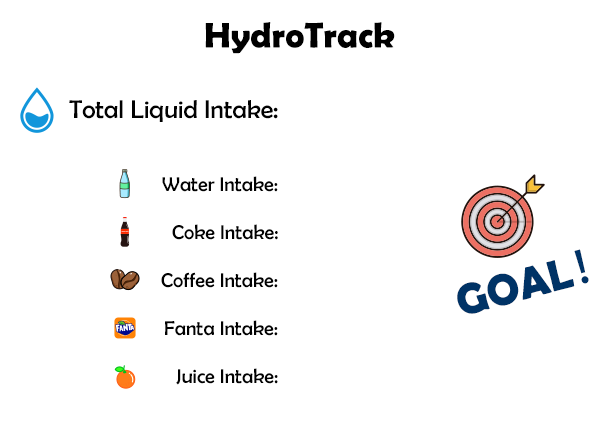
<style>
.page{position:relative;width:600px;height:448px;background:#ffffff}
.page>*{position:absolute;margin:0}
.t1{font:36px "BerlinSansFBDemi-Bold";color:#000000}
.t2{font:25.7px "BerlinSansFB-Reg";color:#010101}
.t3{font:20.2px "BerlinSansFB-Reg";color:#010101}
.t4{font:44px "BerlinSansFBDemi-Bold";color:#003366}
.t5{font:44px "AdobeHeitiStd-Regular";color:#003366}
</style>
<div class="page">
<p class="t1" style="left:205px;top:22px;width:190px;height:32px">HydroTrack</p>
<p class="t2" style="left:69px;top:100px;width:209px;height:22px">Total Liquid Intake:</p>
<p class="t3" style="left:162px;top:176px;width:116px;height:16px">Water Intake:</p>
<p class="t3" style="left:172px;top:224px;width:106px;height:16px">Coke Intake:</p>
<p class="t4" style="left:457px;top:249px;width:132px;height:65px;rotate:-15deg">GOAL<span class="t5">！</span></p>
<p class="t3" style="left:161px;top:272px;width:117px;height:16px">Coffee Intake:</p>
<p class="t3" style="left:165px;top:320px;width:113px;height:16px">Fanta Intake:</p>
<p class="t3" style="left:176px;top:368px;width:102px;height:17px">Juice Intake:</p>
</div>
